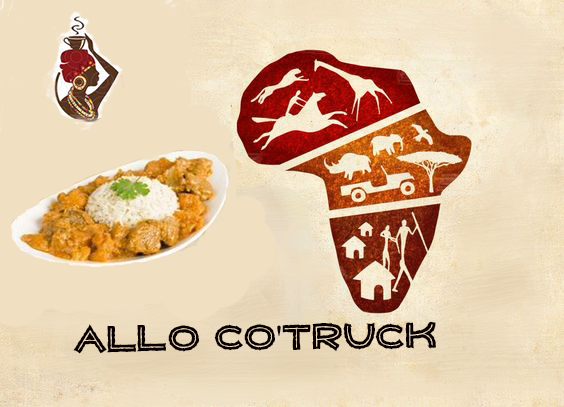
<style>
.page{position:relative;width:564px;height:407px;background:#f0dfc1}
.page>*{position:absolute;margin:0}
.t1{font:36px "WILDAFRICA";color:#0b0000}
.t2{font:36px "TimesNewRomanPSMT";color:#0b0000}
</style>
<div class="page">
<p class="t1" style="left:73px;top:321px;width:363px;height:33px;rotate:-1deg">ALLO CO<span class="t2">'</span>TRUCK</p>
</div>
